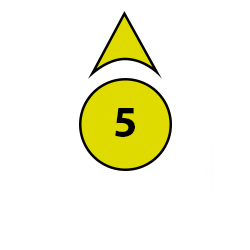
<style>
.page{position:relative;width:250px;height:250px;background:#ffffff}
.page>*{position:absolute;margin:0}
.t1{font:43.8px "MyriadPro-Bold";letter-spacing:-0.025em;color:#000000}
</style>
<div class="page">
<p class="t1" style="left:115px;top:108px;width:20px;height:29px">5</p>
</div>
